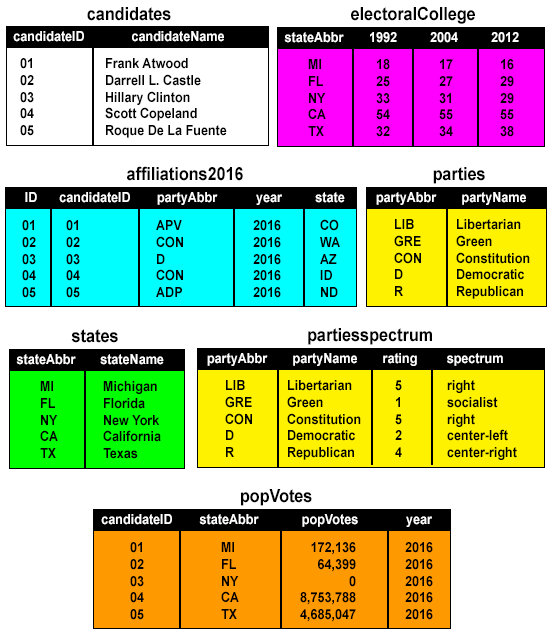
<style>
.page{position:relative;width:553px;height:637px;background:#ffffff}
.page>*{position:absolute;margin:0}
.t1{font:18px "Arial-BoldMT";color:#000000;scale:0.9 1}
.t2{font:14px "Arial-BoldMT";color:#ffffff;scale:0.9 1}
.t3{font:14px "Arial-BoldMT";color:#000000;scale:0.9 1}
</style>
<div class="page">
<p class="t1" style="left:351px;top:6px;width:124px;height:18px">electoralCollege</p>
<p class="t1" style="left:87px;top:7px;width:84px;height:14px">candidates</p>
<p class="t2" style="left:13px;top:31px;width:71px;height:11px">candidateID</p>
<p class="t2" style="left:132px;top:31px;width:92px;height:11px">candidateName</p>
<p class="t2" style="left:284px;top:32px;width:60px;height:11px">stateAbbr</p>
<p class="t2" style="left:370px;top:32px;width:27px;height:11px">1992</p>
<p class="t2" style="left:430px;top:32px;width:28px;height:11px">2004</p>
<p class="t2" style="left:491px;top:32px;width:28px;height:11px">2012</p>
<p class="t3" style="left:20px;top:58px;width:14px;height:78px">01<br>02<br>03<br>04<br>05</p>
<p class="t3" style="left:105px;top:58px;width:122px;height:80px">Frank Atwood<br>Darrell L. Castle<br>Hillary Clinton<br>Scott Copeland<br>Roque De La Fuente</p>
<p class="t3" style="left:308px;top:59px;width:18px;height:77px">MI<br>FL<br>NY<br>CA<br>TX</p>
<p class="t3" style="left:376px;top:59px;width:14px;height:78px">18<br>25<br>33<br>54<br>32</p>
<p class="t3" style="left:439px;top:59px;width:14px;height:78px">17<br>27<br>31<br>55<br>34</p>
<p class="t3" style="left:500px;top:59px;width:14px;height:78px">16<br>29<br>29<br>55<br>38</p>
<p class="t1" style="left:127px;top:166px;width:116px;height:15px">affiliations2016</p>
<p class="t1" style="left:433px;top:167px;width:52px;height:17px">parties</p>
<p class="t2" style="left:25px;top:192px;width:12px;height:10px">ID</p>
<p class="t2" style="left:59px;top:192px;width:71px;height:11px">candidateID</p>
<p class="t2" style="left:157px;top:192px;width:61px;height:13px">partyAbbr</p>
<p class="t2" style="left:256px;top:194px;width:26px;height:11px">year</p>
<p class="t2" style="left:315px;top:192px;width:30px;height:11px">state</p>
<p class="t2" style="left:376px;top:192px;width:61px;height:13px">partyAbbr</p>
<p class="t2" style="left:462px;top:192px;width:64px;height:13px">partyName</p>
<p class="t3" style="left:22px;top:220px;width:14px;height:78px">01<br>02<br>03<br>04<br>05</p>
<p class="t3" style="left:66px;top:220px;width:14px;height:78px">01<br>02<br>03<br>04<br>05</p>
<p class="t3" style="left:156px;top:220px;width:27px;height:77px">APV<br>CON<br>D<br>CON<br>ADP</p>
<p class="t3" style="left:253px;top:220px;width:28px;height:78px;text-align:right">2016<br>2016<br>2016<br>2016<br>2016</p>
<p class="t3" style="left:320px;top:219px;width:20px;height:78px">CO<br>WA<br>AZ<br>ID<br>ND</p>
<p class="t3" style="left:394px;top:219px;width:27px;height:77px">LIB<br>GRE<br>CON<br>D<br>R</p>
<p class="t3" style="left:456px;top:219px;width:74px;height:80px">Libertarian<br>Green<br>Constitution<br>Democratic<br>Republican</p>
<p class="t1" style="left:71px;top:329px;width:47px;height:14px">states</p>
<p class="t1" style="left:308px;top:328px;width:124px;height:17px">partiesspectrum</p>
<p class="t2" style="left:207px;top:353px;width:61px;height:13px">partyAbbr</p>
<p class="t2" style="left:293px;top:353px;width:64px;height:13px">partyName</p>
<p class="t2" style="left:383px;top:353px;width:34px;height:13px">rating</p>
<p class="t2" style="left:447px;top:353px;width:56px;height:13px">spectrum</p>
<p class="t2" style="left:16px;top:354px;width:60px;height:11px">stateAbbr</p>
<p class="t2" style="left:100px;top:354px;width:64px;height:11px">stateName</p>
<p class="t3" style="left:40px;top:381px;width:18px;height:77px">MI<br>FL<br>NY<br>CA<br>TX</p>
<p class="t3" style="left:103px;top:381px;width:58px;height:78px">Michigan<br>Florida<br>New York<br>California<br>Texas</p>
<p class="t3" style="left:225px;top:380px;width:27px;height:77px">LIB<br>GRE<br>CON<br>D<br>R</p>
<p class="t3" style="left:287px;top:380px;width:74px;height:80px">Libertarian<br>Green<br>Constitution<br>Democratic<br>Republican</p>
<p class="t3" style="left:395px;top:380px;width:7px;height:77px">5<br>1<br>5<br>2<br>4</p>
<p class="t3" style="left:447px;top:380px;width:70px;height:80px">right<br>socialist<br>right<br>center-left<br>center-right</p>
<p class="t1" style="left:241px;top:489px;width:71px;height:17px">popVotes</p>
<p class="t2" style="left:101px;top:514px;width:71px;height:11px">candidateID</p>
<p class="t2" style="left:199px;top:514px;width:60px;height:11px">stateAbbr</p>
<p class="t2" style="left:302px;top:514px;width:56px;height:13px">popVotes</p>
<p class="t2" style="left:406px;top:516px;width:26px;height:11px">year</p>
<p class="t3" style="left:130px;top:542px;width:14px;height:78px">01<br>02<br>03<br>04<br>05</p>
<p class="t3" style="left:221px;top:542px;width:18px;height:77px">MI<br>FL<br>NY<br>CA<br>TX</p>
<p class="t3" style="left:300px;top:542px;width:56px;height:80px;text-align:right">172,136<br>64,399<br>0<br>8,753,788<br>4,685,047</p>
<p class="t3" style="left:405px;top:542px;width:28px;height:78px;text-align:right">2016<br>2016<br>2016<br>2016<br>2016</p>
</div>
